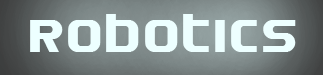
<style>
.page{position:relative;width:323px;height:75px}
.page>*{position:absolute;margin:0}
.t1{font:48px "Electrofied";color:#edffff}
</style>
<div class="page">
<p class="t1" style="left:30px;top:14px;width:266px;height:38px">Robotics</p>
</div>
